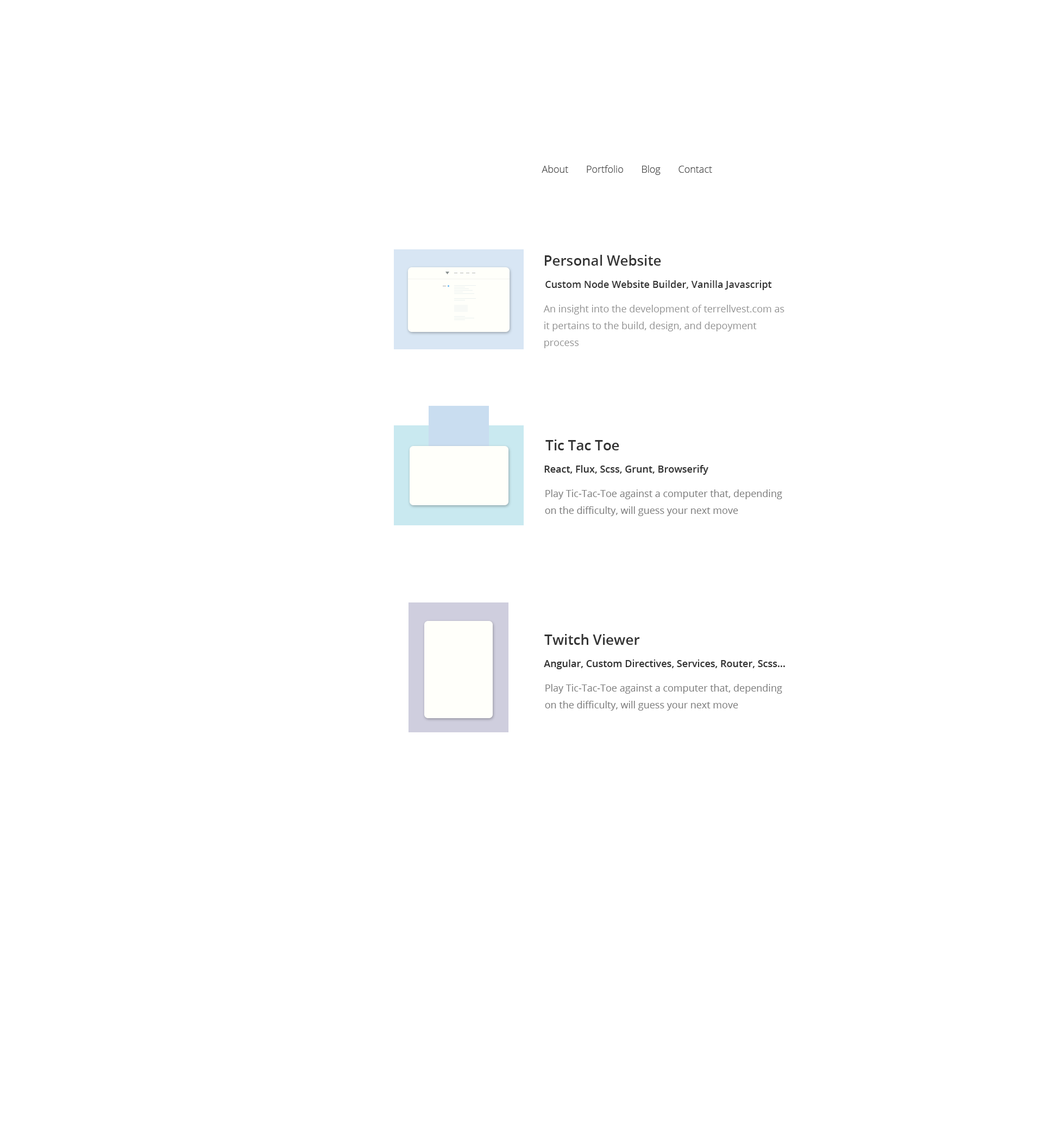
<style>
.page{position:relative;width:1043px;height:1143px;background:#ffffff}
.page>*{position:absolute;margin:0}
.t1{font:9.8px "OpenSans-Light";color:#434343}
.t2{font:14.1px "OpenSans-Semibold";color:#343434}
.t3{font:9.8px "OpenSans-Semibold";color:#343434}
.t4{font:9.8px/16.8px "OpenSans";color:#929292}
.t5{font:9.8px/16.8px "OpenSans";color:#7d7d7d}
</style>
<div class="page">
<p class="t1" style="left:542px;top:165px;width:170px;height:10px">About       Portfolio       Blog       Contact</p>
<p class="t2" style="left:545px;top:255px;width:116px;height:11px">Personal Website</p>
<p class="t3" style="left:545px;top:280px;width:227px;height:10px">Custom Node Website Builder, Vanilla Javascript</p>
<p class="t4" style="left:543px;top:305px;width:242px;height:43px">An insight into the development of terrellvest.com as it pertains to the build, design, and depoyment process</p>
<p class="t2" style="left:545px;top:440px;width:74px;height:10px">Tic Tac Toe</p>
<p class="t3" style="left:544px;top:465px;width:164px;height:10px">React, Flux, Scss, Grunt, Browserify</p>
<p class="t5" style="left:545px;top:490px;width:237px;height:26px">Play Tic-Tac-Toe against a computer that, depending on the difficulty, will guess your next move</p>
<p class="t2" style="left:544px;top:634px;width:96px;height:11px">Twitch Viewer</p>
<p class="t3" style="left:544px;top:660px;width:241px;height:9px">Angular, Custom Directives, Services, Router, Scss...</p>
<p class="t5" style="left:545px;top:684px;width:237px;height:27px">Play Tic-Tac-Toe against a computer that, depending on the difficulty, will guess your next move</p>
</div>
